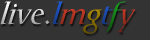
<style>
.page{position:relative;width:150px;height:40px;background:#333333}
.page>*{position:absolute;margin:0}
.t1{font:32px "Catull-Italic"}
</style>
<div class="page">
<p class="t1" style="left:0px;top:1px;width:136px;height:33px">live.lmgtfy</p>
</div>
